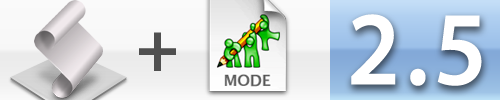
<style>
.page{position:relative;width:500px;height:100px}
.page>*{position:absolute;margin:0}
.t1{font:106px "MyriadPro-Semibold";letter-spacing:0.05em;color:#ffffff;scale:0.94 1}
.t2{font:72px "MyriadPro-Bold";letter-spacing:0.05em;color:#4f4f4f}
</style>
<div class="page">
<p class="t1" style="left:351px;top:14px;width:131px;height:72px">2.5</p>
<p class="t2" style="left:139px;top:32px;width:37px;height:39px">+</p>
</div>
